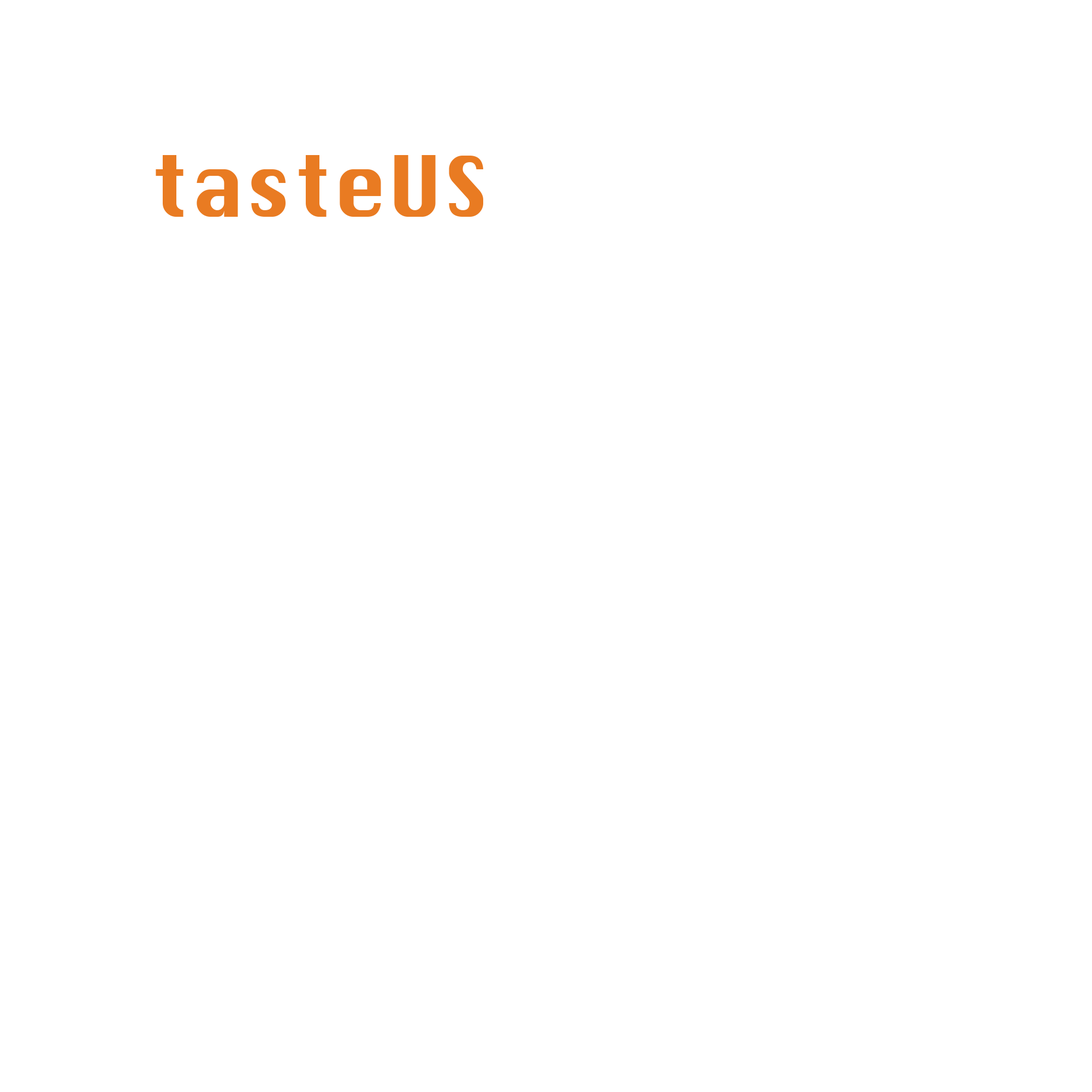
<style>
.page{position:relative;width:1092px;height:1092px;background:#ffffff}
.page>*{position:absolute;margin:0}
.t1{font:81.9px "Silom";color:#e97b22}
</style>
<div class="page">
<p class="t1" style="left:156px;top:155px;width:327px;height:62px">tasteUS</p>
</div>
